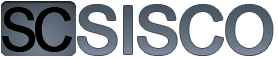
<style>
.page{position:relative;width:278px;height:59px;background:#ffffff}
.page>*{position:absolute;margin:0}
.t1{font:65.1px "ArialMT";letter-spacing:-0.04em;font-weight:bold}
</style>
<div class="page">
<p class="t1" style="left:78px;top:5px;width:195px;height:50px">SISCO</p>
</div>
